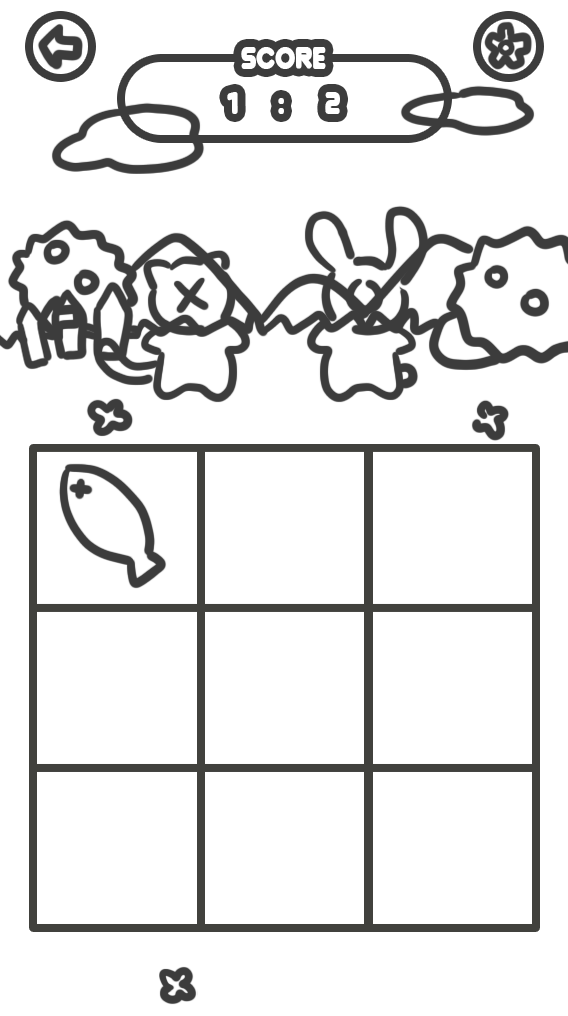
<style>
.page{position:relative;width:568px;height:1016px;background:#ffffff}
.page>*{position:absolute;margin:0}
.t1{font:12px "Levitation";color:#ffffff;scale:0.88 1}
</style>
<div class="page">
<p class="t1" style="left:241px;top:47px;width:85px;height:22px">score</p>
</div>
